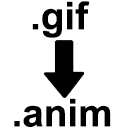
<style>
.page{position:relative;width:128px;height:128px;background:#ffffff}
.page>*{position:absolute;margin:0}
.t1{font:38.7px "Arial-BoldMT";color:#000000}
</style>
<div class="page">
<p class="t1" style="left:32px;top:1px;width:58px;height:37px">.gif</p>
<p class="t1" style="left:14px;top:98px;width:97px;height:29px">.anim</p>
</div>
